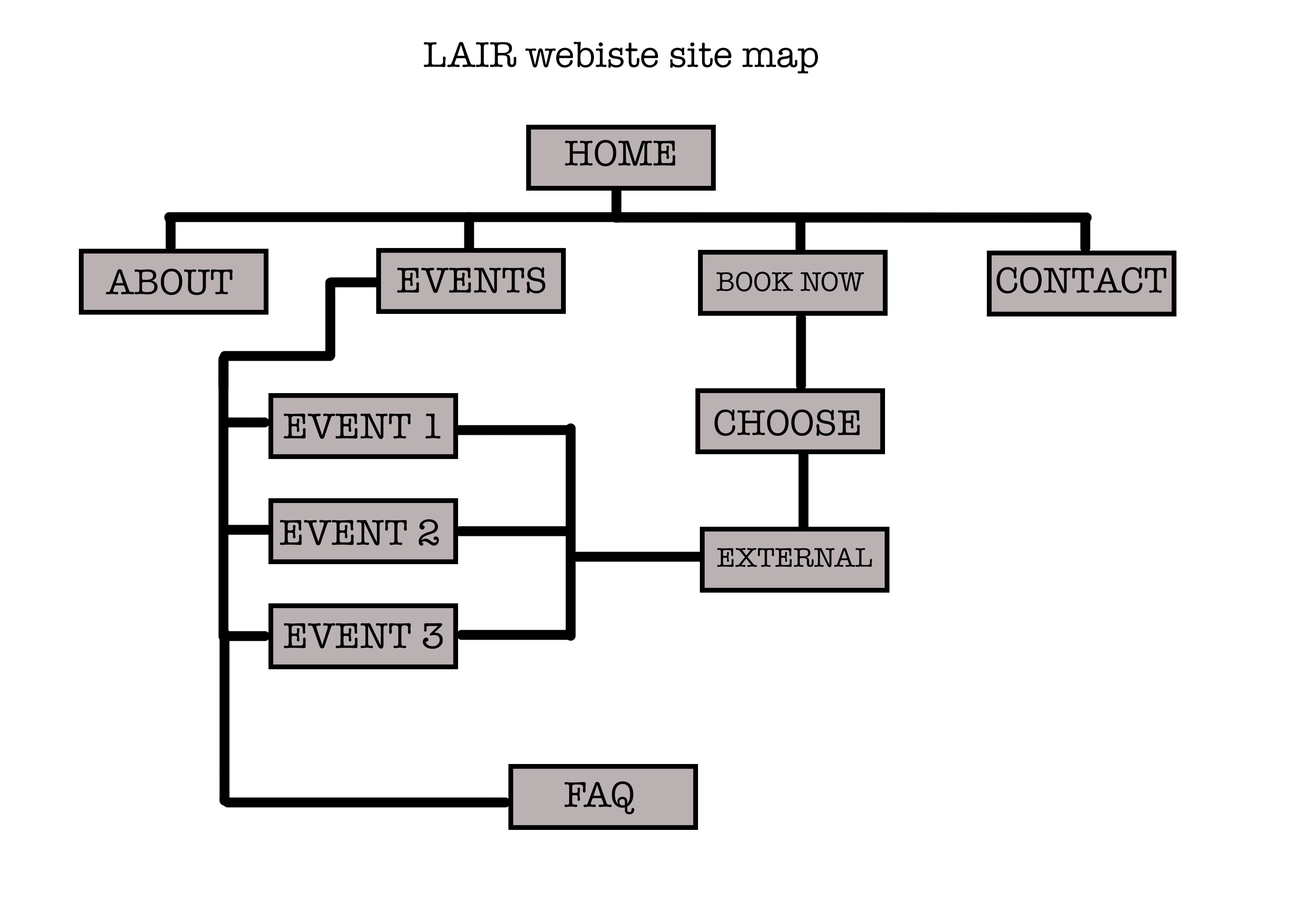
<style>
.page{position:relative;width:1299px;height:918px;background:#ffffff}
.page>*{position:absolute;margin:0}
.t1{font:37px "AmericanTypewriter";color:#030300}
.t2{font:27.8px "AmericanTypewriter";color:#030300}
</style>
<div class="page">
<p class="t1" style="left:424px;top:41px;width:394px;height:33px">LAIR webiste site map</p>
<p class="t1" style="left:565px;top:140px;width:110px;height:27px">HOME</p>
<p class="t1" style="left:106px;top:268px;width:126px;height:27px">ABOUT</p>
<p class="t1" style="left:397px;top:267px;width:148px;height:27px">EVENTS</p>
<p class="t1" style="left:996px;top:267px;width:170px;height:27px">CONTACT</p>
<p class="t2" style="left:716px;top:272px;width:148px;height:20px">BOOK NOW</p>
<p class="t1" style="left:284px;top:414px;width:157px;height:25px">EVENT 1</p>
<p class="t1" style="left:714px;top:409px;width:146px;height:27px">CHOOSE</p>
<p class="t1" style="left:280px;top:519px;width:159px;height:27px">EVENT 2</p>
<p class="t2" style="left:717px;top:548px;width:155px;height:20px">EXTERNAL</p>
<p class="t1" style="left:284px;top:623px;width:159px;height:26px">EVENT 3</p>
<p class="t1" style="left:564px;top:781px;width:70px;height:33px">FAQ</p>
</div>
